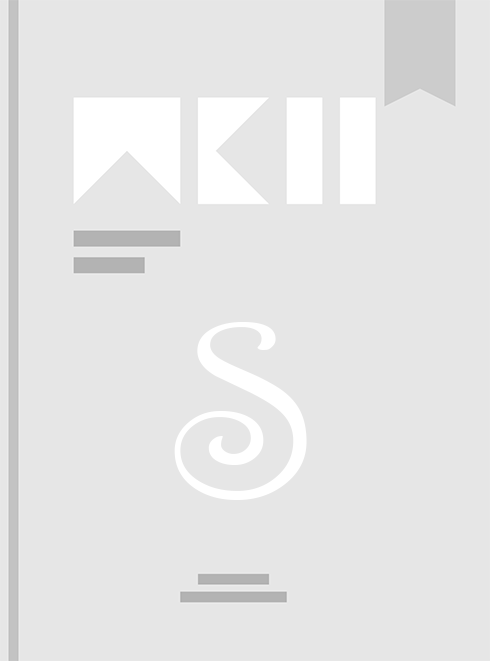
<style>
.page{position:relative;width:490px;height:661px;background:#e6e6e6}
.page>*{position:absolute;margin:0}
.t1{font:250.2px "Harrington";color:#ffffff}
</style>
<div class="page">
<p class="t1" style="left:174px;top:322px;width:133px;height:178px">S</p>
</div>
